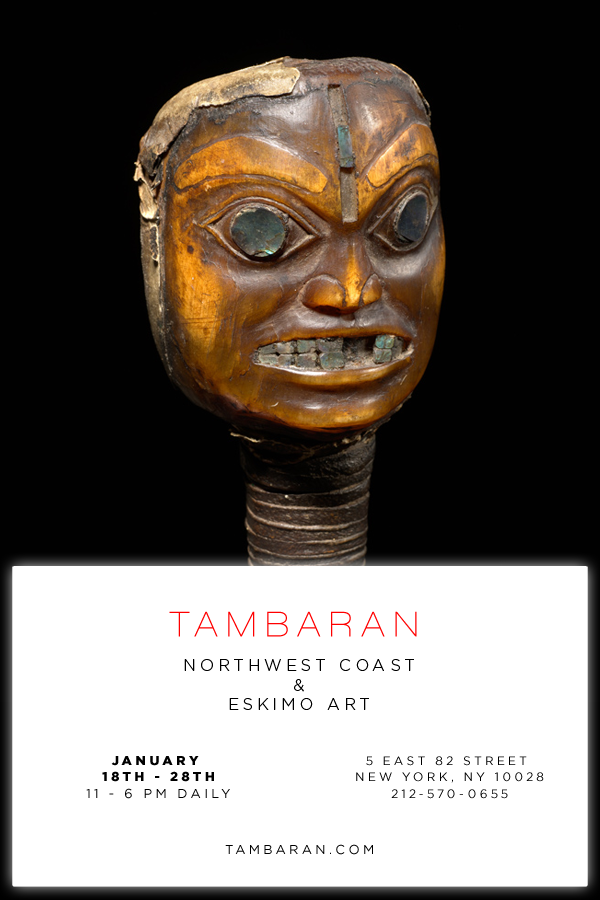
<style>
.page{position:relative;width:600px;height:900px;background:#010101}
.page>*{position:absolute;margin:0}
.t1{font:36px "WalkwaySemiBold";letter-spacing:0.265em;color:#ff0000}
.t2{font:16px "GothamHTF-Light";letter-spacing:0.265em;color:#000000;text-transform:uppercase}
.t3{font:16px "GothamHTF-Light";letter-spacing:0.065em;color:#000000;text-transform:uppercase}
.t4{font:13px/16.8px "GothamHTF-Black";letter-spacing:0.265em;color:#000000;text-transform:uppercase}
.t5{font:13px/16.8px "GothamHTF-Book";letter-spacing:0.265em;color:#000000;text-transform:uppercase}
.t6{font:12px/16.8px "GothamHTF-Book";letter-spacing:0.265em;color:#000000;text-transform:uppercase}
.t7{font:13px "GothamHTF-Book";letter-spacing:0.265em;color:#000000;text-transform:uppercase}
</style>
<div class="page">
<p class="t1" style="left:169px;top:611px;width:248px;height:26px">TAMBARAN</p>
<p class="t2" style="left:184px;top:659px;width:230px;height:51px;text-align:center">Northwest Coast<br><span class="t3">&amp;<br></span>Eskimo Art</p>
<p class="t4" style="left:86px;top:756px;width:144px;height:43px;text-align:center">January <br>18th - 28th<br><span class="t5">11 - 6 pm daily</span></p>
<p class="t6" style="left:356px;top:756px;width:188px;height:43px;text-align:center">5 East 82 Street <br>New York, NY 10028<br>212-570-0655</p>
<p class="t7" style="left:225px;top:844px;width:148px;height:11px">TAMBARAN.COM</p>
</div>
